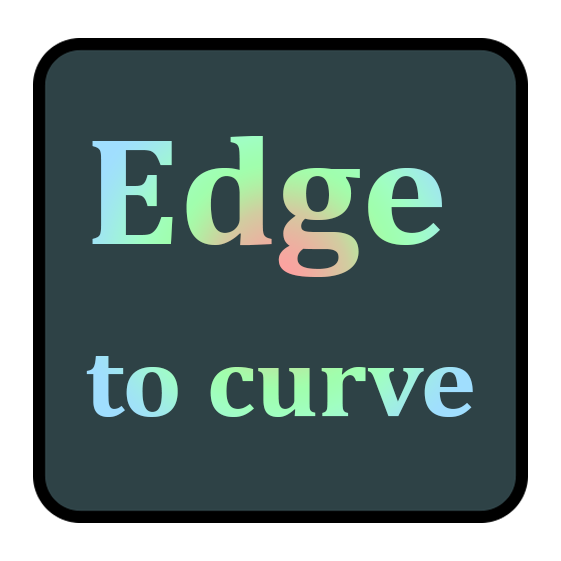
<style>
.page{position:relative;width:561px;height:561px;background:#2e4246}
.page>*{position:absolute;margin:0}
.t1{font:99.7px/171.7px "Cambria-Bold";scale:1.06 1}
.t2{font:154px/171.7px "Cambria-Bold";scale:1.06 1}
</style>
<div class="page">
<p class="t1" style="left:86px;top:136px;width:387px;height:281px"><span class="t2">Edge<br></span>to curve</p>
</div>
